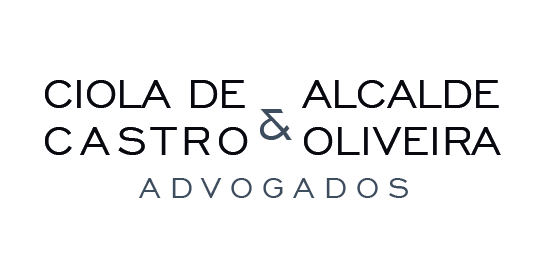
<style>
.page{position:relative;width:547px;height:263px;background:#ffffff}
.page>*{position:absolute;margin:0}
.t1{font:51.3px/46.7px "EngraversGothicBT-Regular";letter-spacing:-0.01em;color:#08090e}
.t2{font:51.3px/46.7px "EngraversGothicBT-Regular";letter-spacing:0.13em;color:#08090e}
.t3{font:51.3px/46.7px "EngraversGothicBT-Regular";letter-spacing:0.01em;color:#08090e}
.t4{font:58.3px "EngraversGothicBT-Regular";letter-spacing:-0.01em;color:#3e4d5e}
.t5{font:36.6px "EngraversGothicBT-Regular";letter-spacing:0.25em;color:#3e4d5e;text-transform:uppercase}
</style>
<div class="page">
<p class="t1" style="left:45px;top:80px;width:203px;height:75px">CIOLA DE<br><span class="t2">CASTRO</span></p>
<p class="t3" style="left:302px;top:80px;width:199px;height:75px"><span class="t1">ALCALDE<br></span>OLIVEIRA</p>
<p class="t4" style="left:260px;top:109px;width:32px;height:31px">&amp;</p>
<p class="t5" style="left:139px;top:178px;width:269px;height:20px">Advogados</p>
</div>
